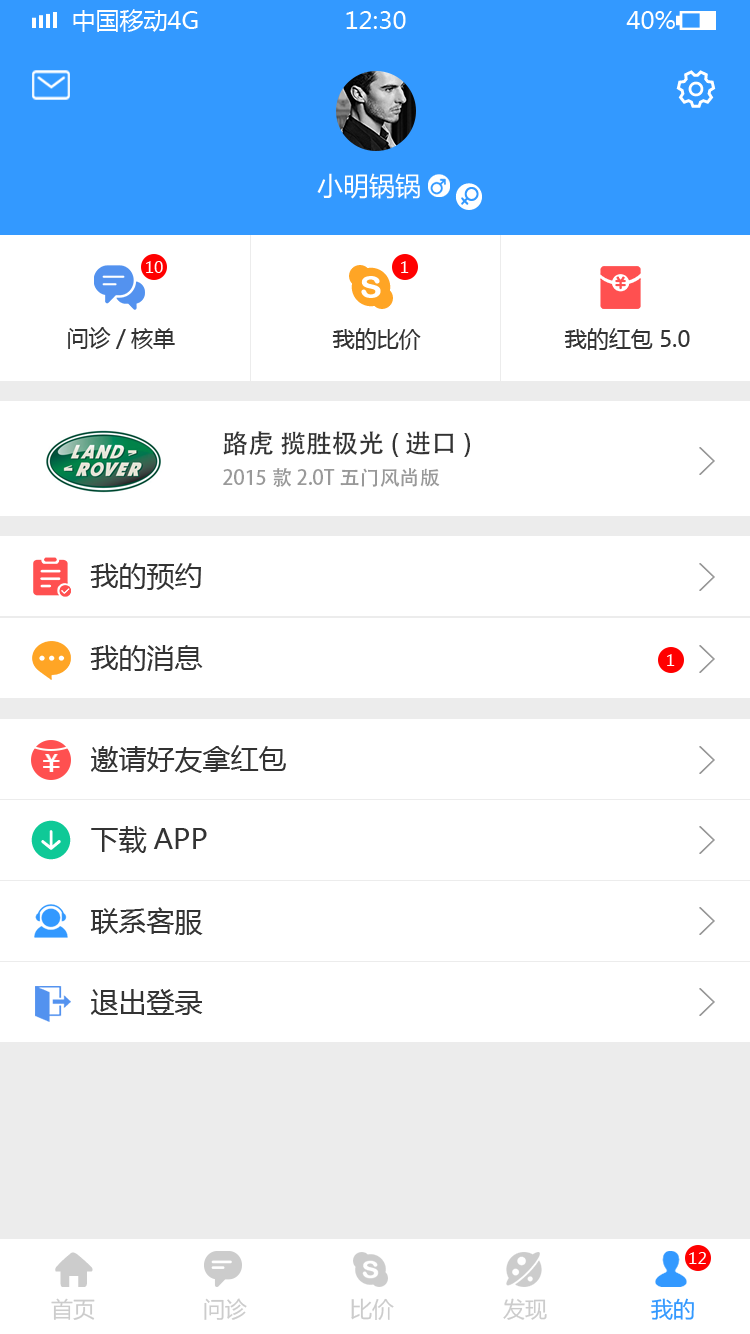
<style>
.page{position:relative;width:750px;height:1334px;background:#ffffff}
.page>*{position:absolute;margin:0}
.t1{font:24px "MicrosoftYaHei";color:#ffffff;text-transform:uppercase}
.t2{font:26px "MicrosoftYaHei";color:#ffffff}
.t3{font:16px "MicrosoftYaHei";color:#ffffff}
.t4{font:22px "MicrosoftYaHei";color:#333333}
.t5{font:20px/37px "AdobeHeitiStd-Regular";color:#999999}
.t6{font:26px/37px "AdobeHeitiStd-Regular";color:#333333}
.t7{font:28px "MicrosoftYaHei";color:#333333}
.t8{font:22px "MicrosoftYaHei";color:#cccccc}
.t9{font:22px "MicrosoftYaHei";color:#3399ff}
</style>
<div class="page">
<p class="t1" style="left:73px;top:9px;width:125px;height:23px">中国移动4G</p>
<p class="t1" style="left:346px;top:11px;width:60px;height:18px">12:30</p>
<p class="t1" style="left:626px;top:11px;width:49px;height:18px">40%</p>
<p class="t2" style="left:317px;top:173px;width:103px;height:26px">小明锅锅</p>
<p class="t3" style="left:146px;top:261px;width:17px;height:12px">10</p>
<p class="t3" style="left:401px;top:261px;width:8px;height:12px">1</p>
<p class="t4" style="left:68px;top:327px;width:107px;height:22px">问诊/核单</p>
<p class="t4" style="left:332px;top:328px;width:89px;height:22px">我的比价</p>
<p class="t4" style="left:564px;top:328px;width:126px;height:22px">我的红包 5.0</p>
<p class="t5" style="left:223px;top:431px;width:247px;height:56px"><span class="t6">路虎 揽胜极光(进口)  <br></span>2015款 2.0T五门风尚版</p>
<p class="t7" style="left:90px;top:563px;width:111px;height:27px">我的预约</p>
<p class="t7" style="left:90px;top:645px;width:113px;height:26px">我的消息</p>
<p class="t3" style="left:667px;top:654px;width:8px;height:12px">1</p>
<p class="t7" style="left:91px;top:745px;width:195px;height:28px">邀请好友拿红包</p>
<p class="t7" style="left:91px;top:826px;width:116px;height:27px">下载APP</p>
<p class="t7" style="left:90px;top:907px;width:113px;height:28px">联系客服</p>
<p class="t7" style="left:91px;top:989px;width:112px;height:26px">退出登录</p>
<p class="t3" style="left:689px;top:1252px;width:17px;height:12px">12</p>
<p class="t8" style="left:51px;top:1298px;width:44px;height:22px">首页</p>
<p class="t8" style="left:204px;top:1298px;width:43px;height:22px">问诊</p>
<p class="t8" style="left:351px;top:1298px;width:43px;height:22px">比价</p>
<p class="t8" style="left:503px;top:1298px;width:44px;height:22px">发现</p>
<p class="t9" style="left:651px;top:1298px;width:43px;height:22px">我的</p>
</div>
